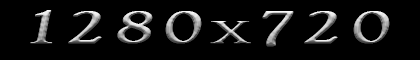
<style>
.page{position:relative;width:420px;height:60px;background:#000000}
.page>*{position:absolute;margin:0}
.t1{font:48px "GoudyOldStyleT-Italic";letter-spacing:0.075em;font-variant:small-caps;font-weight:bold;scale:1.67 1}
.t2{font:36px "RingbearerMedium";letter-spacing:0.075em;scale:1.67 1}
</style>
<div class="page">
<p class="t1" style="left:30px;top:10px;width:360px;height:37px">1280<span class="t2">x</span>720</p>
<p class="t1" style="left:30px;top:10px;width:360px;height:37px">1280<span class="t2">x</span>720</p>
</div>
